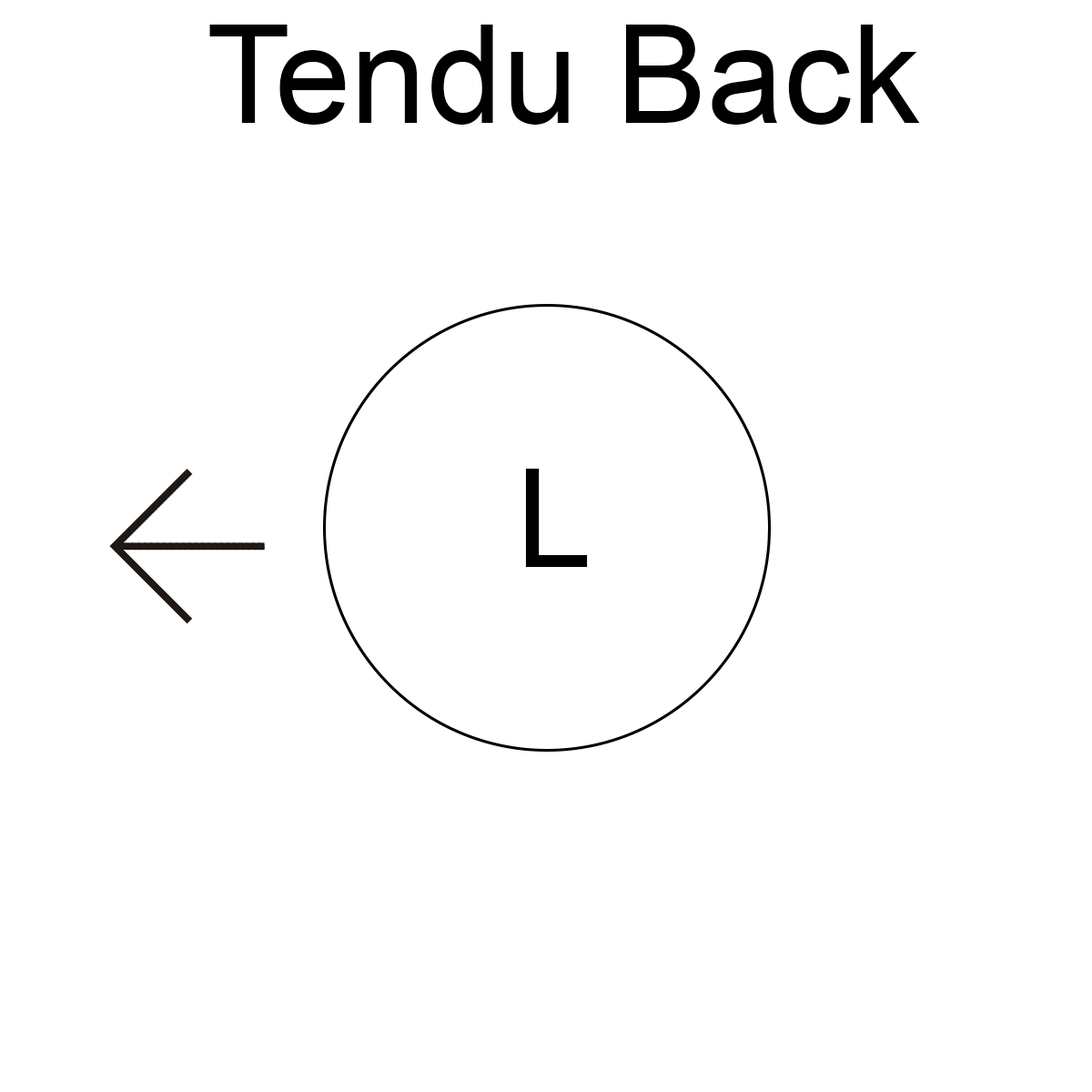
<style>
.page{position:relative;width:1092px;height:1092px;background:#ffffff}
.page>*{position:absolute;margin:0}
.t1{font:136.5px "ArialMT";color:#000000}
</style>
<div class="page">
<p class="t1" style="left:209px;top:25px;width:711px;height:100px">Tendu Back</p>
<p class="t1" style="left:525px;top:469px;width:63px;height:98px">L</p>
</div>
